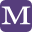
<style>
.page{position:relative;width:32px;height:32px;background:#563d7c}
.page>*{position:absolute;margin:0}
.t1{font:25.8px "Georgia";color:#ffffff;scale:1.31 1}
</style>
<div class="page">
<p class="t1" style="left:1px;top:6px;width:30px;height:19px">M</p>
</div>
